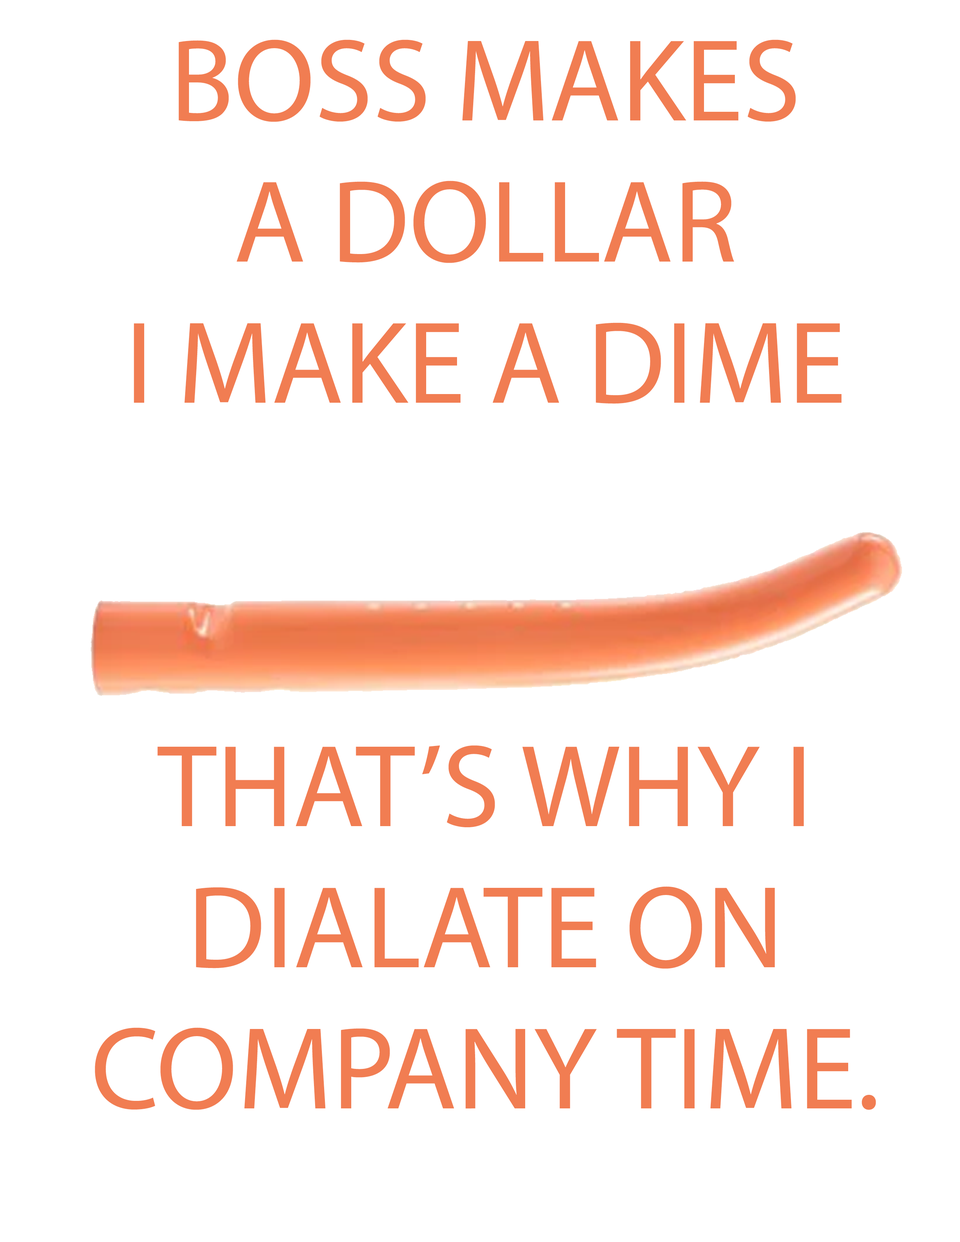
<style>
.page{position:relative;width:960px;height:1242px;background:#ffffff}
.page>*{position:absolute;margin:0}
.t1{font:117.6px "MyriadPro-Regular";color:#f17d52}
</style>
<div class="page">
<p class="t1" style="left:95px;top:40px;width:781px;height:1070px;text-align:center">BOSS MAKES<br>A DOLLAR<br>I MAKE A DIME<br><br><br>THAT’S WHY I<br>DIALATE ON COMPANY TIME.</p>
</div>
